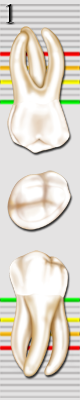
<style>
.page{position:relative;width:80px;height:400px;background:#e4e3e3}
.page>*{position:absolute;margin:0}
.t1{font:28.4px "TimesNewRomanPSMT";letter-spacing:0.005em}
</style>
<div class="page">
<p class="t1" style="left:6px;top:4px;width:8px;height:19px">1</p>
</div>
